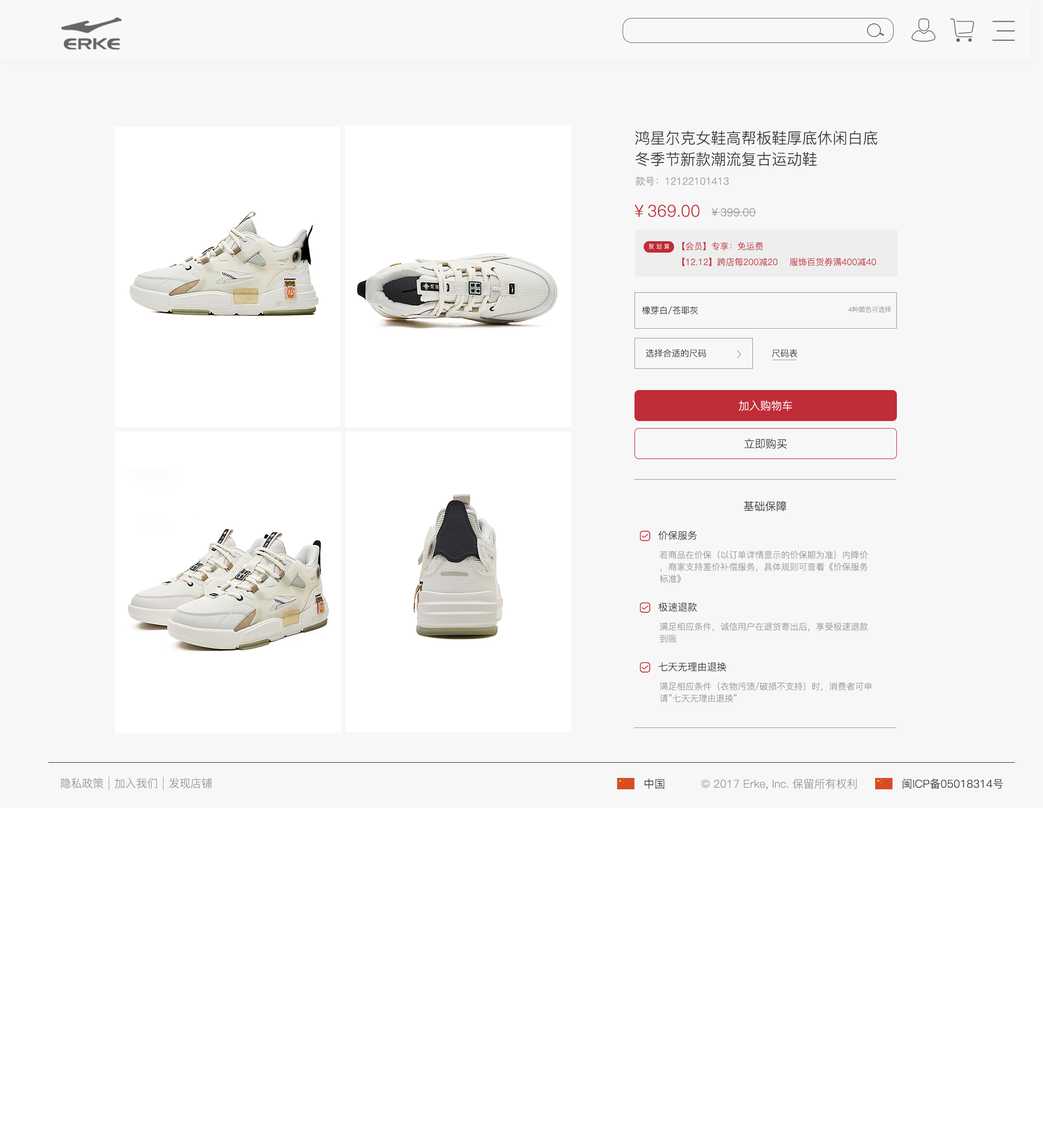
<style>
.page{position:relative;width:1043px;height:1143px;background:#ffffff}
.page>*{position:absolute;margin:0}
.t1{font:15.2px/21.2px "PingFang-SC-Regular";color:#333333}
.t2{font:9.8px "PingFang-SC-Regular";color:#999999}
.t3{font:16.3px "PingFang-SC-Regular";color:#c02c38}
.t4{font:10.9px "PingFang-SC-Regular";color:#999999}
.t5{font:8.7px "PingFang-SC-Regular";color:#c02c38}
.t6{font:8.7px "PingFang-SC-Regular";color:#333333}
.t7{font:6.5px "PingFang-SC-Regular";color:#999999}
.t8{font:10.9px "PingFang-SC-Regular";color:#ffffff}
.t9{font:10.9px "PingFang-SC-Regular";color:#333333}
.t10{font:9.8px "PingFang-SC-Regular";color:#333333}
.t11{font:8.7px/12px "PingFang-SC-Regular";color:#999999}
</style>
<div class="page">
<p class="t1" style="left:635px;top:130px;width:242px;height:36px">鸿星尔克女鞋高帮板鞋厚底休闲白底<br>冬季节新款潮流复古运动鞋</p>
<p class="t2" style="left:636px;top:177px;width:93px;height:9px">款号：12122101413</p>
<p class="t3" style="left:635px;top:205px;width:65px;height:12px">￥369.00</p>
<p class="t4" style="left:712px;top:208px;width:43px;height:9px">￥399.00</p>
<p class="t5" style="left:682px;top:242px;width:81px;height:8px">【会员】专享：免运费</p>
<p class="t5" style="left:682px;top:258px;width:194px;height:8px">【12.12】跨店每200减20    服饰百货劵满400减40</p>
<p class="t6" style="left:642px;top:306px;width:56px;height:9px">橡芽白/苍耶灰</p>
<p class="t7" style="left:848px;top:306px;width:44px;height:7px">4种颜色可选择</p>
<p class="t6" style="left:646px;top:349px;width:60px;height:8px">选择合适的尺码</p>
<p class="t6" style="left:772px;top:349px;width:26px;height:8px">尺码表</p>
<p class="t8" style="left:739px;top:400px;width:53px;height:11px">加入购物车</p>
<p class="t9" style="left:744px;top:438px;width:43px;height:11px">立即购买</p>
<p class="t9" style="left:744px;top:501px;width:43px;height:10px">基础保障</p>
<p class="t10" style="left:658px;top:531px;width:39px;height:9px">价保服务</p>
<p class="t11" style="left:660px;top:550px;width:208px;height:33px">若商品在价保（以订单详情显示的价保期为准）内降价，商家支持差价补偿服务，具体规则可查看《价保服务标准》</p>
<p class="t10" style="left:658px;top:603px;width:39px;height:9px">极速退款</p>
<p class="t11" style="left:660px;top:622px;width:208px;height:21px">满足相应条件，诚信用户在退货寄出后，享受极速退款到账</p>
<p class="t10" style="left:658px;top:662px;width:68px;height:10px">七天无理由退换</p>
<p class="t11" style="left:660px;top:682px;width:211px;height:20px">满足相应条件（衣物污渍/破损不支持）时，消费者可申请“七天无理由退换”</p>
<p class="t4" style="left:61px;top:778px;width:42px;height:10px">隐私政策</p>
<p class="t4" style="left:115px;top:778px;width:42px;height:10px">加入我们</p>
<p class="t4" style="left:169px;top:778px;width:43px;height:10px">发现店铺</p>
<p class="t9" style="left:644px;top:779px;width:20px;height:10px">中国</p>
<p class="t4" style="left:701px;top:779px;width:156px;height:10px">© 2017 Erke, Inc. 保留所有权利</p>
<p class="t9" style="left:902px;top:779px;width:101px;height:10px">闽ICP备05018314号</p>
</div>
